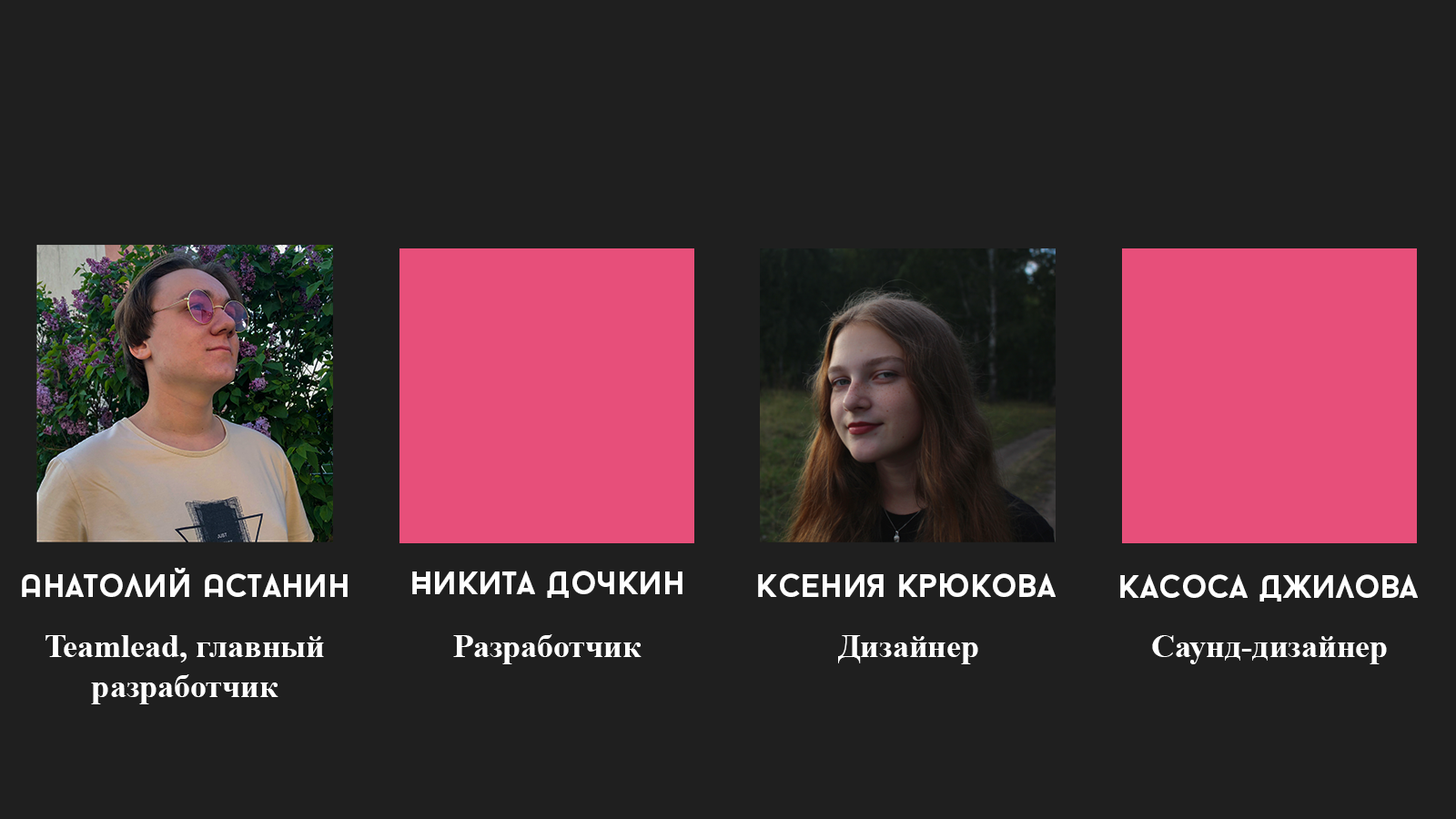
<style>
.page{position:relative;width:1456px;height:819px;background:#1f1f1f}
.page>*{position:absolute;margin:0}
.t1{font:32.8px "BaronNeueBold";color:#ffffff}
.t2{font:32.8px "TimesNewRomanPS-BoldMT";color:#ffffff}
</style>
<div class="page">
<p class="t1" style="left:22px;top:568px;width:326px;height:29px">Анатолий Астанин</p>
<p class="t1" style="left:412px;top:571px;width:270px;height:27px">Никита Дочкин</p>
<p class="t1" style="left:758px;top:573px;width:298px;height:24px">Ксения Крюкова</p>
<p class="t1" style="left:1120px;top:574px;width:298px;height:28px">Касоса Джилова</p>
<p class="t2" style="left:45px;top:635px;width:279px;height:69px;text-align:center">Teamlead, главный разработчик</p>
<p class="t2" style="left:453px;top:634px;width:189px;height:30px">Разработчик</p>
<p class="t2" style="left:838px;top:635px;width:140px;height:29px">Дизайнер</p>
<p class="t2" style="left:1152px;top:635px;width:235px;height:29px">Саунд-дизайнер</p>
</div>
